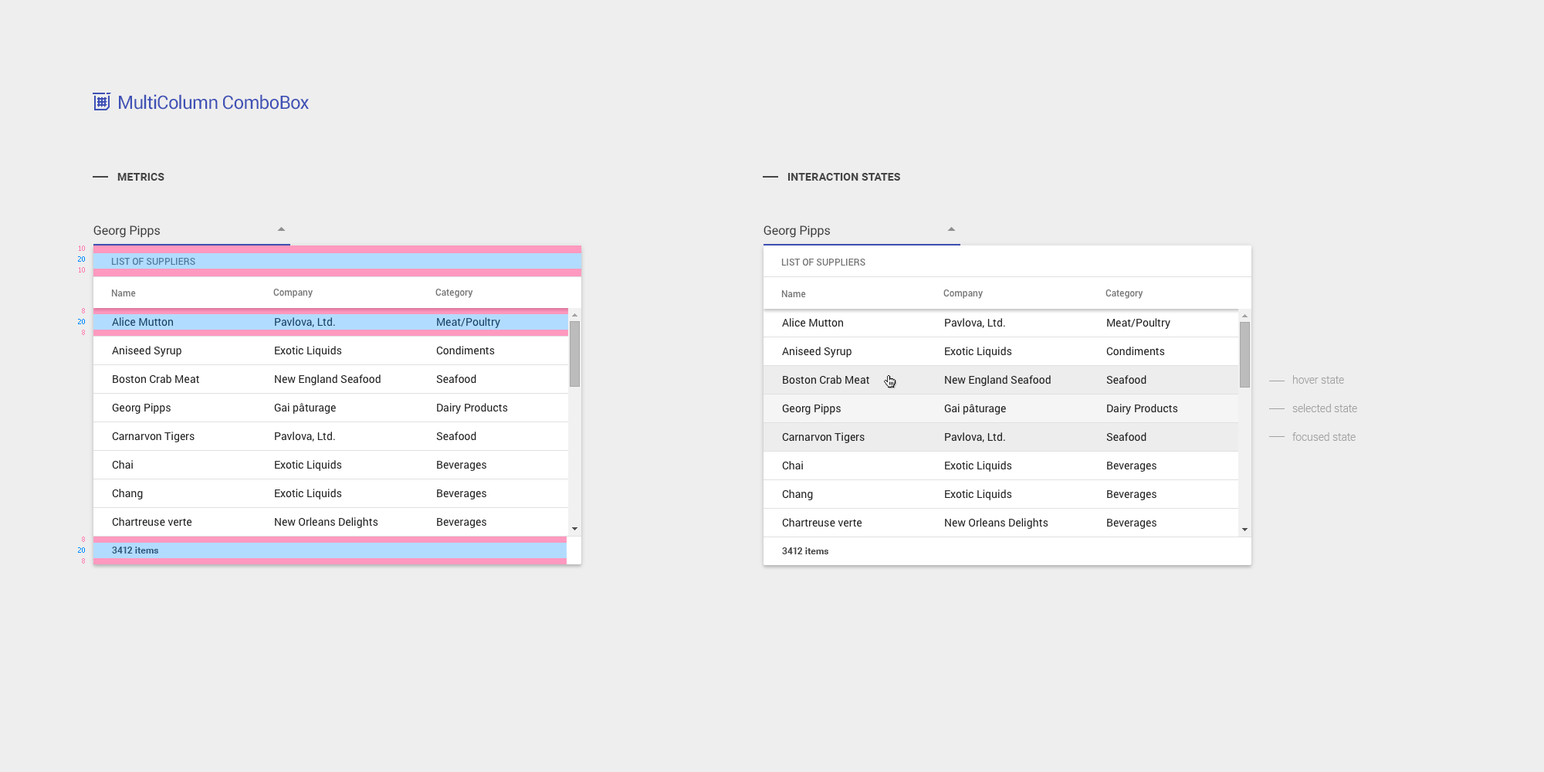
<style>
.page{position:relative;width:1544px;height:772px;background:#eeeeee}
.page>*{position:absolute;margin:0}
.t1{font:18.5px "Roboto-Regular";letter-spacing:-0.025em;color:#3f51b5}
.t2{font:10.8px "Roboto-Bold";letter-spacing:0.01em;color:#454545;text-transform:uppercase}
.t3{font:12.4px "Roboto-Regular";color:#3b3b3b}
.t4{font:6.9px "Tahoma";color:#ff7cae;scale:1.03 1}
.t5{font:6.9px "Tahoma";color:#008aff;scale:1.03 1}
.t6{font:9.3px "Roboto-Medium";color:#527b9f;text-transform:uppercase}
.t7{font:9.3px "Roboto-Medium";color:#757575;text-transform:uppercase}
.t8{font:9.3px "Roboto-Medium";color:#757575}
.t9{font:6.9px "Tahoma";color:#ff7cae}
.t10{font:10.8px/28.6px "Roboto-Regular";color:#212121}
.t11{font:6.9px "Tahoma";color:#008aff}
.t12{font:10.8px/28.6px "Roboto-Light";color:#a1a1a1}
.t13{font:9.3px "Roboto-Bold";letter-spacing:0.01em;color:#2d567a}
.t14{font:9.3px "Roboto-Bold";letter-spacing:0.01em;color:#404040}
</style>
<div class="page">
<p class="t1" style="left:119px;top:94px;width:190px;height:16px">MultiColumn ComboBox</p>
<p class="t2" style="left:117px;top:173px;width:47px;height:8px">metrics</p>
<p class="t2" style="left:788px;top:173px;width:112px;height:8px">interaction states</p>
<p class="t3" style="left:93px;top:225px;width:68px;height:13px">Georg Pipps</p>
<p class="t3" style="left:764px;top:225px;width:67px;height:13px">Georg Pipps</p>
<p class="t4" style="left:79px;top:246px;width:6px;height:5px">10</p>
<p class="t5" style="left:78px;top:256px;width:7px;height:6px">20</p>
<p class="t6" style="left:111px;top:257px;width:84px;height:9px">List of suppliers</p>
<p class="t7" style="left:781px;top:258px;width:85px;height:8px">List of suppliers</p>
<p class="t4" style="left:79px;top:267px;width:6px;height:6px">10</p>
<p class="t8" style="left:111px;top:290px;width:25px;height:7px">Name</p>
<p class="t8" style="left:273px;top:288px;width:40px;height:10px">Company</p>
<p class="t8" style="left:435px;top:288px;width:38px;height:10px">Category</p>
<p class="t8" style="left:781px;top:290px;width:25px;height:8px">Name</p>
<p class="t8" style="left:944px;top:289px;width:39px;height:10px">Company</p>
<p class="t8" style="left:1106px;top:289px;width:38px;height:10px">Category</p>
<p class="t9" style="left:82px;top:308px;width:3px;height:5px">8</p>
<p class="t10" style="left:112px;top:317px;width:87px;height:210px">Alice Mutton<br>Aniseed Syrup<br>Boston Crab Meat<br>Georg Pipps<br>Carnarvon Tigers<br>Chai <br>Chang<br>Chartreuse verte</p>
<p class="t10" style="left:274px;top:317px;width:107px;height:211px">Pavlova, Ltd.<br>Exotic Liquids<br>New England Seafood<br>Gai pâturage<br>Pavlova, Ltd.<br>Exotic Liquids<br>Exotic Liquids<br>New Orleans Delights</p>
<p class="t10" style="left:436px;top:317px;width:72px;height:211px">Meat/Poultry<br>Condiments<br>Seafood<br>Dairy Products<br>Seafood<br>Beverages<br>Beverages<br>Beverages</p>
<p class="t11" style="left:78px;top:319px;width:7px;height:5px">20</p>
<p class="t9" style="left:82px;top:330px;width:3px;height:5px">8</p>
<p class="t10" style="left:782px;top:318px;width:87px;height:209px">Alice Mutton<br>Aniseed Syrup<br>Boston Crab Meat<br>Georg Pipps<br>Carnarvon Tigers<br>Chai <br>Chang<br>Chartreuse verte</p>
<p class="t10" style="left:944px;top:318px;width:107px;height:211px">Pavlova, Ltd.<br>Exotic Liquids<br>New England Seafood<br>Gai pâturage<br>Pavlova, Ltd.<br>Exotic Liquids<br>Exotic Liquids<br>New Orleans Delights</p>
<p class="t10" style="left:1106px;top:318px;width:72px;height:211px">Meat/Poultry<br>Condiments<br>Seafood<br>Dairy Products<br>Seafood<br>Beverages<br>Beverages<br>Beverages</p>
<p class="t12" style="left:1293px;top:375px;width:64px;height:66px">hover state<br>selected state<br>focused state</p>
<p class="t9" style="left:82px;top:537px;width:3px;height:5px">8</p>
<p class="t11" style="left:78px;top:547px;width:7px;height:6px">20</p>
<p class="t13" style="left:112px;top:547px;width:46px;height:7px">3412 items</p>
<p class="t14" style="left:782px;top:547px;width:47px;height:7px">3412 items</p>
<p class="t9" style="left:82px;top:558px;width:3px;height:6px">8</p>
</div>
